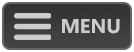
<style>
.page{position:relative;width:134px;height:52px}
.page>*{position:absolute;margin:0}
.t1{font:20px "SegoeUI-Bold";color:#cccccc}
</style>
<div class="page">
<p class="t1" style="left:62px;top:19px;width:58px;height:15px">MENU</p>
</div>
